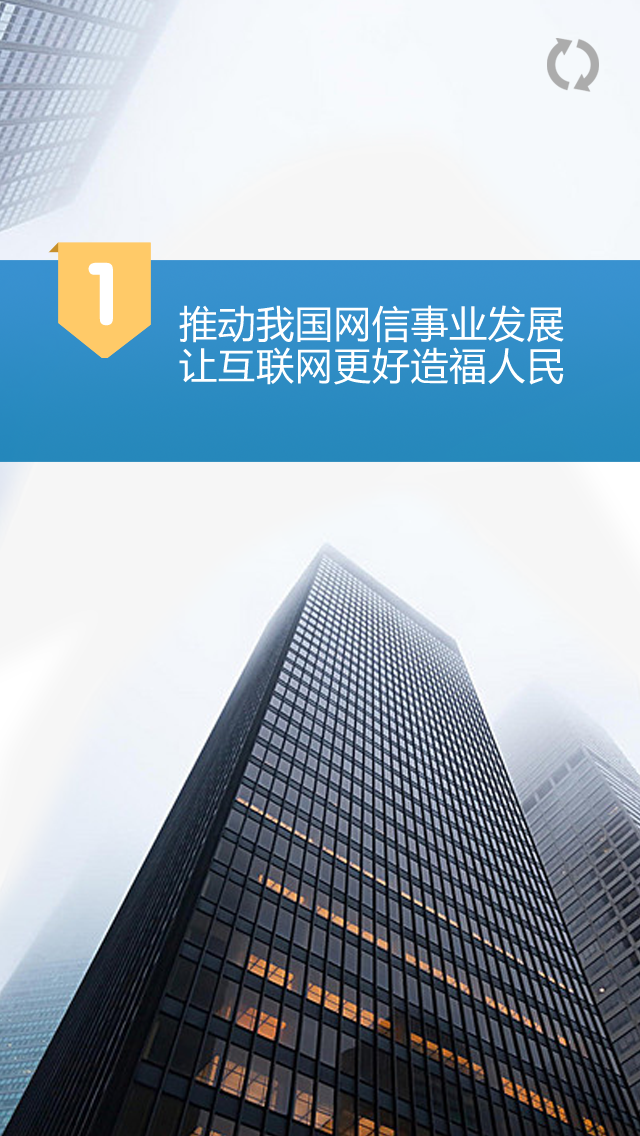
<style>
.page{position:relative;width:640px;height:1136px}
.page>*{position:absolute;margin:0}
.t1{font:87.7px "FZY4JW--GB1-0";letter-spacing:0.015em;color:#ffffff}
.t2{font:38px/42px "MicrosoftYaHei";letter-spacing:0.015em;color:#ffffff}
</style>
<div class="page">
<p class="t1" style="left:88px;top:262px;width:25px;height:64px">1</p>
<p class="t2" style="left:179px;top:305px;width:385px;height:80px">推动我国网信事业发展<br>让互联网更好造福人民</p>
</div>
